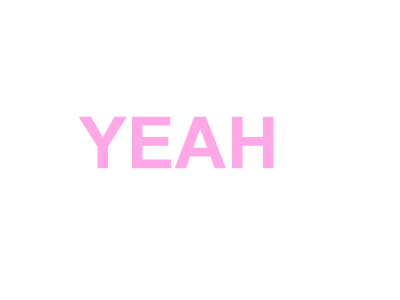
<style>
.page{position:relative;width:400px;height:300px;background:#ffffff}
.page>*{position:absolute;margin:0}
.t1{font:72px "Arial-BoldMT";color:#ffa7e7}
</style>
<div class="page">
<p class="t1" style="left:78px;top:116px;width:196px;height:53px">YEAH</p>
</div>
